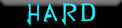
<style>
.page{position:relative;width:122px;height:28px;background:#000000}
.page>*{position:absolute;margin:0}
.t1{font:27.8px "RWBY_Style";letter-spacing:0.14em;color:#1ef2ff;scale:1.08 1}
</style>
<div class="page">
<p class="t1" style="left:26px;top:3px;width:70px;height:23px">hard</p>
</div>
